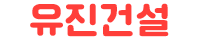
<style>
.page{position:relative;width:200px;height:40px;background:#ffffff}
.page>*{position:absolute;margin:0}
.t1{font:37.5px "Cafe24Ssurround";color:#ff3e39}
</style>
<div class="page">
<p class="t1" style="left:30px;top:3px;width:139px;height:34px">유진건설</p>
</div>
